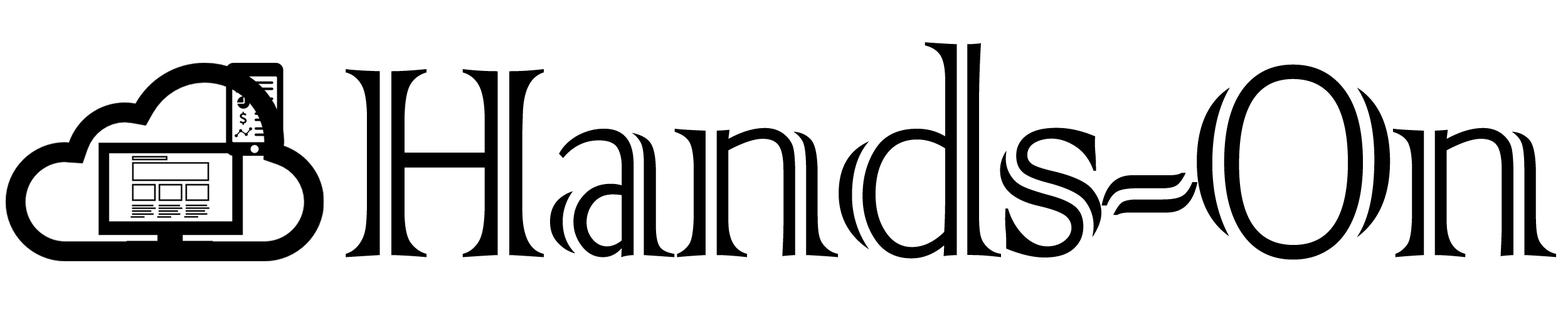
<style>
.page{position:relative;width:1568px;height:314px;background:#ffffff}
.page>*{position:absolute;margin:0}
.t1{font:356.5px "ColonnaMT";letter-spacing:-0.04em;color:#000000;scale:0.91 1}
</style>
<div class="page">
<p class="t1" style="left:346px;top:42px;width:1210px;height:218px">Hands-On</p>
</div>
